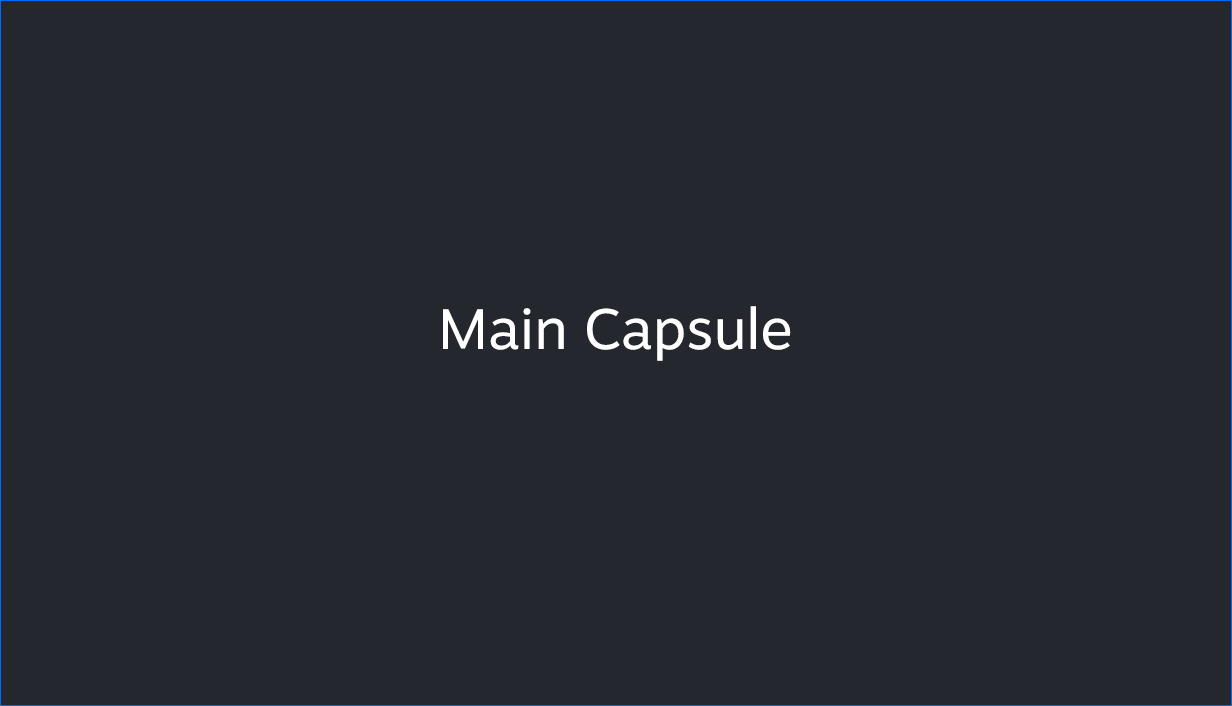
<style>
.page{position:relative;width:1232px;height:706px;background:#24282e}
.page>*{position:absolute;margin:0}
.t1{font:56.8px "MotivaSans-Regular";color:#ffffff}
</style>
<div class="page">
<p class="t1" style="left:443px;top:306px;width:348px;height:55px">Main Capsule</p>
</div>
